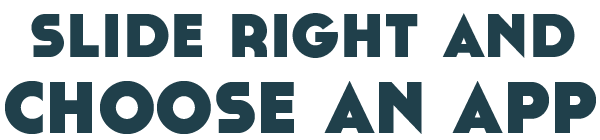
<style>
.page{position:relative;width:600px;height:140px;background:#ffffff}
.page>*{position:absolute;margin:0}
.t1{font:91.7px "Cassannet-Bold";color:#20404b}
.t2{font:108.3px "Cassannet-Bold";color:#20404b}
</style>
<div class="page">
<p class="t1" style="left:31px;top:13px;width:544px;height:45px">slide right and</p>
<p class="t2" style="left:5px;top:81px;width:591px;height:53px">choose an app</p>
</div>
